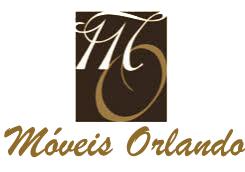
<style>
.page{position:relative;width:245px;height:172px;background:#ffffff}
.page>*{position:absolute;margin:0}
.t1{font:46px "BrushScriptMT";color:#906c2b}
</style>
<div class="page">
<p class="t1" style="left:4px;top:125px;width:241px;height:33px">Móveis Orlando</p>
</div>
